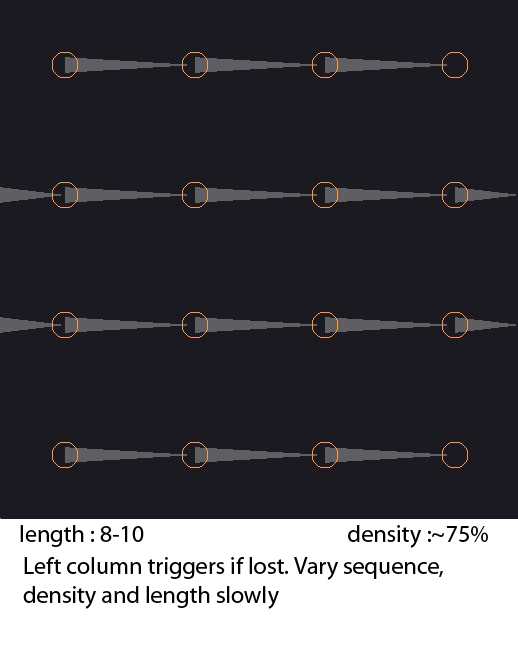
<style>
.page{position:relative;width:518px;height:648px;background:#1b1a20}
.page>*{position:absolute;margin:0}
.t1{font:24px "MyriadPro-Regular";color:#000000}
</style>
<div class="page">
<p class="t1" style="left:20px;top:525px;width:468px;height:23px">length : 8-10                                        density :~75%</p>
<p class="t1" style="left:23px;top:557px;width:420px;height:52px">Left column triggers if lost. Vary sequence, <br>density and length slowly</p>
</div>
